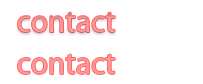
<style>
.page{position:relative;width:203px;height:84px;background:#ffffff}
.page>*{position:absolute;margin:0}
.t1{font:31.5px "MyriadPro-Regular";color:#ff9898}
</style>
<div class="page">
<p class="t1" style="left:18px;top:12px;width:97px;height:20px">contact</p>
</div>
